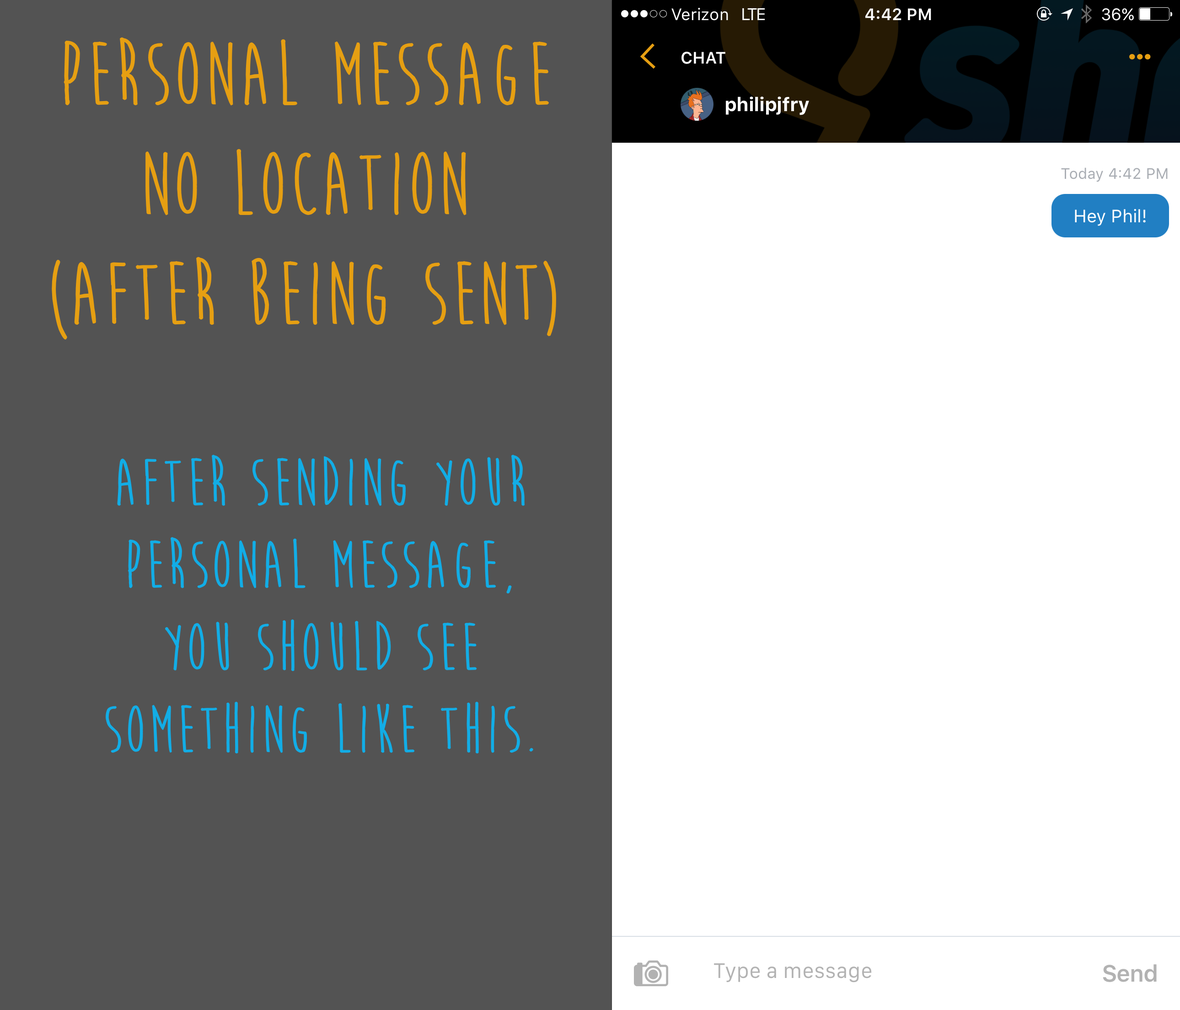
<style>
.page{position:relative;width:1180px;height:1010px;background:#535353}
.page>*{position:absolute;margin:0}
.t1{font:91.5px "MoonFlowerBold";letter-spacing:0.037em;color:#e69f12}
.t2{font:68.6px "MoonFlowerBold";letter-spacing:0.037em;color:#12ade6}
</style>
<div class="page">
<p class="t1" style="left:52px;top:37px;width:504px;height:303px;text-align:center">PERSONAL MESSAGE <br>NO LOCATION (after being SENT)</p>
<p class="t2" style="left:106px;top:455px;width:427px;height:299px;text-align:center">AFTER SENDING YOUR PERSONAL MESSAGE, YOU SHOULD SEE SOMETHING LIKE THIS.</p>
</div>
